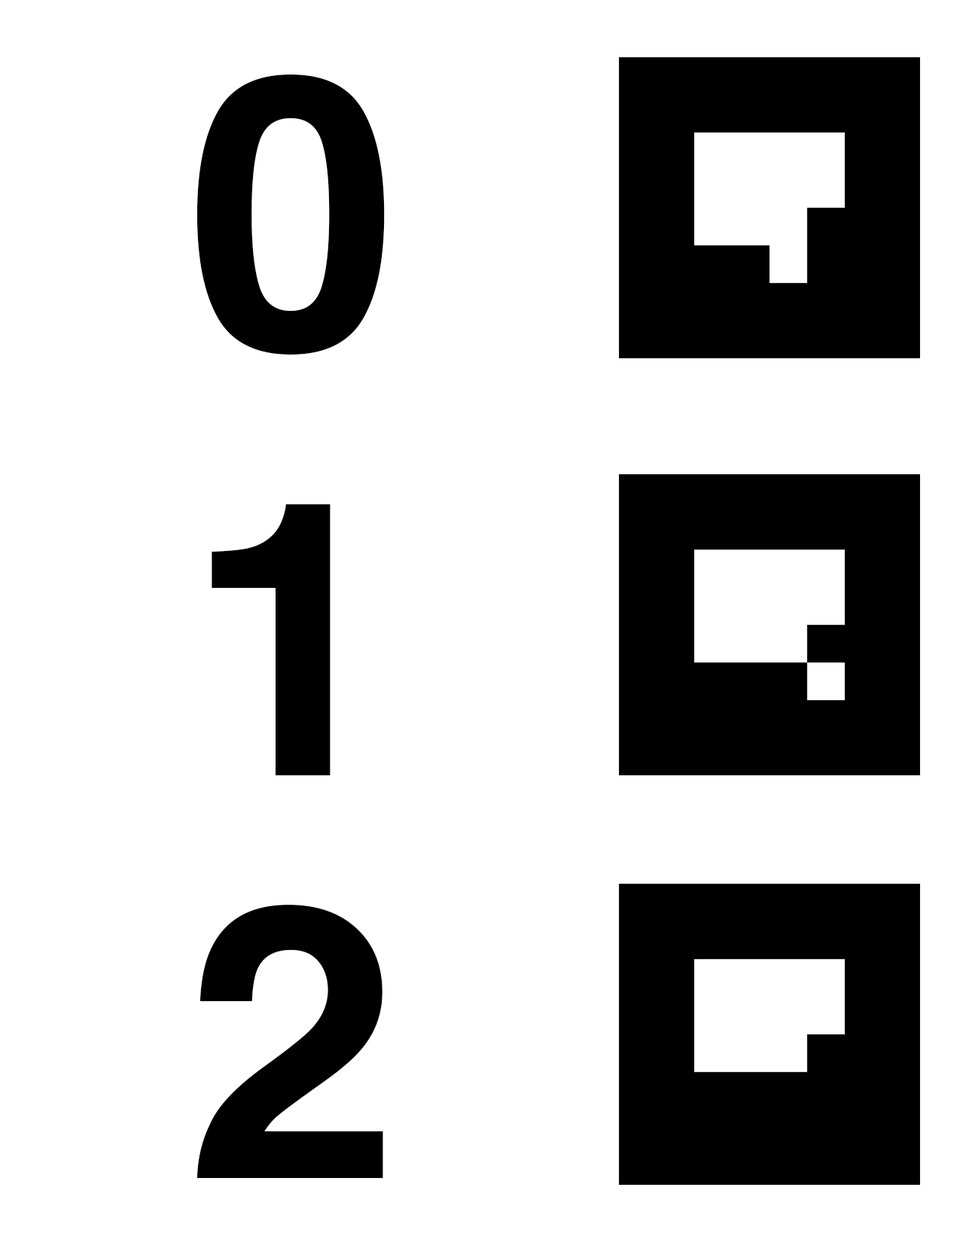
<style>
.page{position:relative;width:960px;height:1242px;background:#ffffff}
.page>*{position:absolute;margin:0}
.t1{font:382.7px "Helvetica-Bold";letter-spacing:0.01em;color:#000000}
</style>
<div class="page">
<p class="t1" style="left:196px;top:75px;width:189px;height:280px">0</p>
<p class="t1" style="left:212px;top:504px;width:119px;height:271px">1</p>
<p class="t1" style="left:196px;top:905px;width:187px;height:273px">2</p>
</div>
